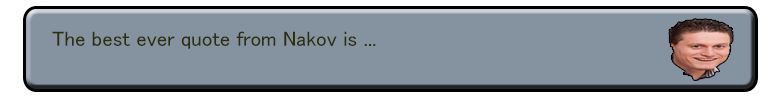
<style>
.page{position:relative;width:770px;height:97px;background:#8592a0}
.page>*{position:absolute;margin:0}
.t1{font:21px "MS-PGothic";color:#2e2e0c}
</style>
<div class="page">
<p class="t1" style="left:52px;top:31px;width:324px;height:18px">The best ever quote from Nakov is ...</p>
</div>
